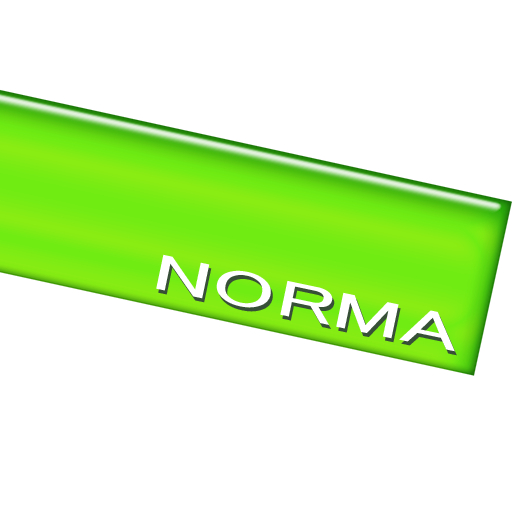
<style>
.page{position:relative;width:512px;height:512px;background:#ffffff}
.page>*{position:absolute;margin:0}
.t1{font:51.8px "MS-PGothic";color:#ffffff;scale:1.8 1}
.t2{font:51.8px "MS-PGothic";scale:1.8 1}
</style>
<div class="page">
<p class="t1" style="left:156px;top:254px;width:299px;height:98px;rotate:12deg">NORMA</p>
<p class="t2" style="left:158px;top:258px;width:299px;height:98px;rotate:12deg">NORMA</p>
</div>
